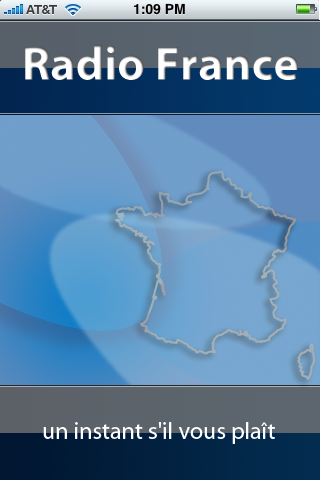
<style>
.page{position:relative;width:320px;height:480px}
.page>*{position:absolute;margin:0}
.t1{font:48px "MyriadPro-Bold";color:#ffffff}
.t2{font:24px "MyriadPro-Regular";color:#ffffff}
</style>
<div class="page">
<p class="t1" style="left:25px;top:45px;width:273px;height:35px">Radio France</p>
<p class="t2" style="left:43px;top:422px;width:232px;height:22px">un instant s'il vous plaît</p>
</div>
